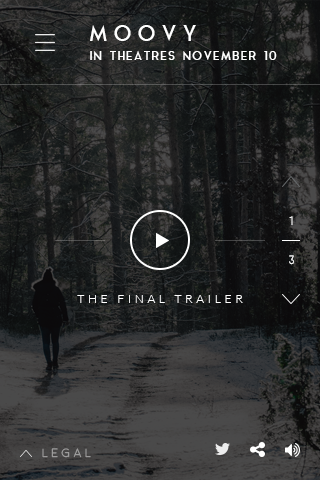
<style>
.page{position:relative;width:320px;height:480px}
.page>*{position:absolute;margin:0}
.t1{font:22px "AquaGrotesque";letter-spacing:0.2em;color:#ffffff;text-transform:uppercase}
.t2{font:12px "AquaGrotesque";letter-spacing:0.05em;color:#ffffff;text-transform:uppercase}
.t3{font:12px "Moon-Light";color:#ffffff}
.t4{font:12px "Lato-Light";letter-spacing:0.3em;color:#ffffff}
.t5{font:12px "Moon-Light";letter-spacing:0.3em;text-transform:uppercase}
</style>
<div class="page">
<p class="t1" style="left:90px;top:25px;width:106px;height:16px">moovy</p>
<p class="t2" style="left:90px;top:51px;width:187px;height:9px">IN THEATRES NoveMBER 10</p>
<p class="t3" style="left:289px;top:216px;width:4px;height:9px">1</p>
<p class="t3" style="left:289px;top:255px;width:5px;height:10px">3</p>
<p class="t4" style="left:77px;top:295px;width:166px;height:8px">THE FINAL TRAILER</p>
<p class="t5" style="left:42px;top:448px;width:49px;height:10px">legal</p>
</div>
